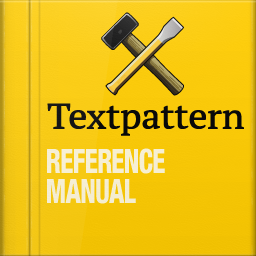
<style>
.page{position:relative;width:256px;height:256px}
.page>*{position:absolute;margin:0}
.t1{font:33.8px/30px "HelveticaNeueLTPro-HvCn";letter-spacing:-0.04em;color:#f6eed3;scale:0.8 1}
</style>
<div class="page">
<p class="t1" style="left:47px;top:148px;width:118px;height:56px">REFERENCE<br>MANUAL</p>
</div>
